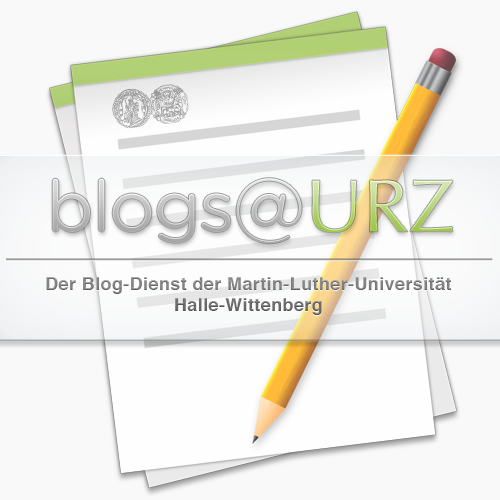
<style>
.page{position:relative;width:500px;height:500px;background:#f9f9f9}
.page>*{position:absolute;margin:0}
.t1{font:71.3px "GothamRounded-Book";letter-spacing:-0.025em}
.t2{font:74.3px "GothamRounded-Book"}
.t3{font:74.3px "Optima-Regular"}
.t4{font:17.9px/21.5px "Helvetica-Bold";letter-spacing:0.025em}
</style>
<div class="page">
<p class="t1" style="left:52px;top:178px;width:401px;height:66px">blogs<span class="t2">@</span><span class="t3">URZ</span></p>
<p class="t1" style="left:52px;top:178px;width:401px;height:66px">blogs<span class="t2">@</span><span class="t3">URZ</span></p>
<p class="t4" style="left:46px;top:277px;width:405px;height:38px;text-align:center">Der Blog-Dienst der Martin-Luther-Universität<br>Halle-Wittenberg</p>
</div>
